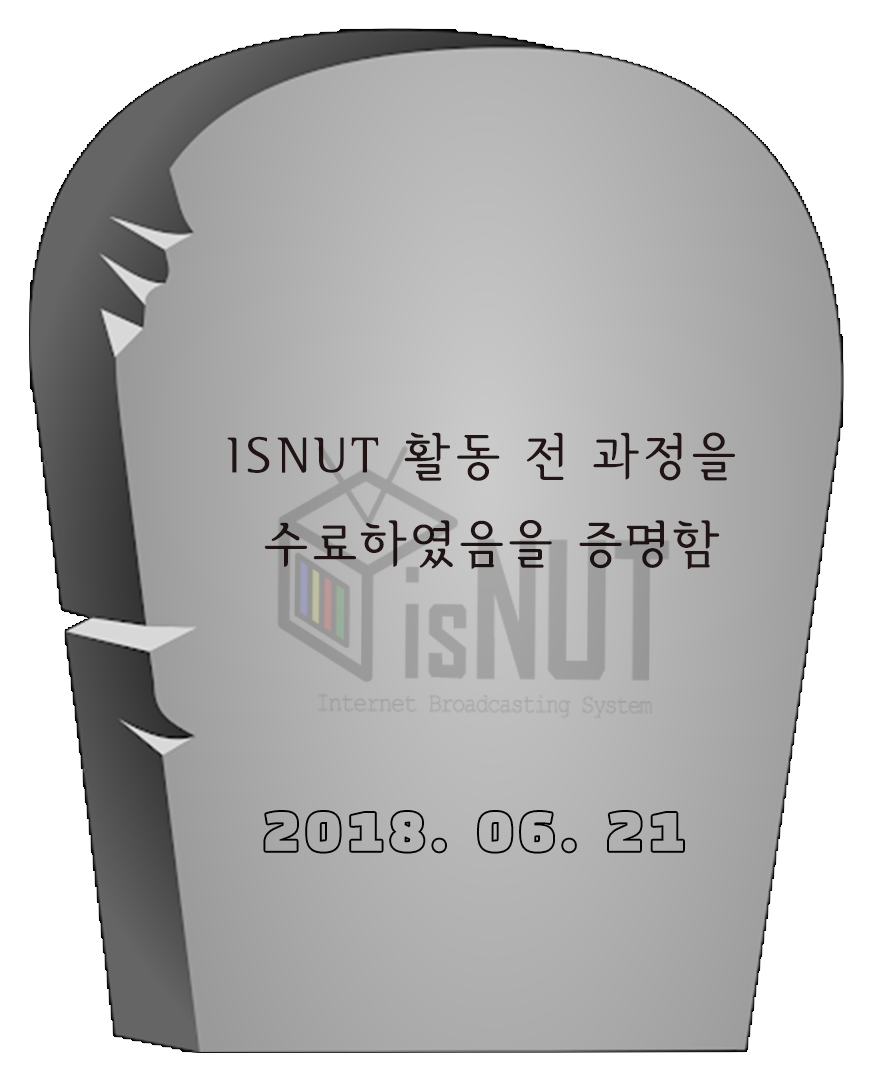
<style>
.page{position:relative;width:871px;height:1080px;background:#ffffff}
.page>*{position:absolute;margin:0}
.t1{font:50px "SeoulHangangM";letter-spacing:0.1em;color:#201414}
</style>
<div class="page">
<p class="t1" style="left:227px;top:432px;width:509px;height:137px;text-align:center">ISNUT 활동 전 과정을 <br>수료하였음을 증명함</p>
</div>
